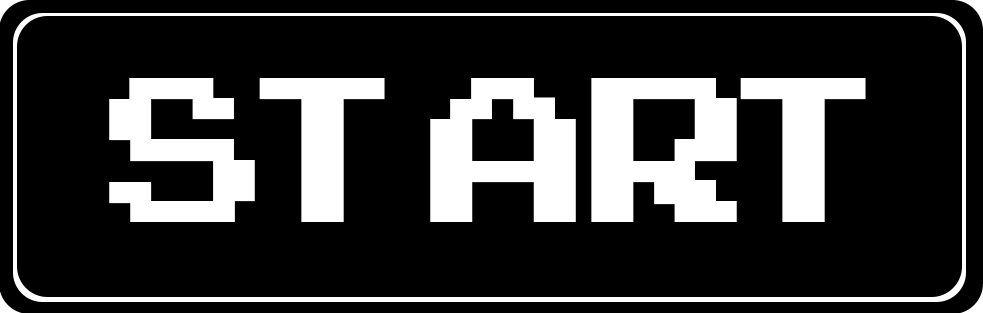
<style>
.page{position:relative;width:983px;height:313px;background:#000000}
.page>*{position:absolute;margin:0}
.t1{font:291.7px "ArcadeClassic";color:#ffffff}
</style>
<div class="page">
<p class="t1" style="left:109px;top:78px;width:757px;height:144px">START</p>
</div>
